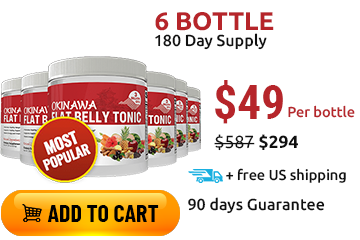
<style>
.page{position:relative;width:360px;height:240px;background:#ffffff}
.page>*{position:absolute;margin:0}
.t1{font:25.6px "Ubuntu-Bold";color:#b6252a}
.t2{font:16px "Ubuntu-Medium";color:#101010}
.t3{font:48px "RobotoCondensed-Bold";color:#b6252a}
.t4{font:14.4px "Ubuntu-Medium";color:#b6252a}
.t5{font:17.6px "Ubuntu-Regular";color:#101010}
.t6{font:17.6px "Ubuntu-Bold";color:#101010}
.t7{font:14.4px "Ubuntu-Medium";color:#101010}
.t8{font:24px "BarlowCondensed-Bold";color:#000000;text-transform:uppercase}
</style>
<div class="page">
<p class="t1" style="left:155px;top:12px;width:119px;height:19px">6 BOTTLE</p>
<p class="t2" style="left:155px;top:33px;width:112px;height:17px">180 Day Supply</p>
<p class="t3" style="left:215px;top:80px;width:68px;height:44px">$49</p>
<p class="t4" style="left:288px;top:105px;width:67px;height:13px">Per bottle</p>
<p class="t5" style="left:214px;top:134px;width:84px;height:17px">$587<span class="t6"> $294</span></p>
<p class="t7" style="left:226px;top:168px;width:120px;height:15px">+ free US shipping</p>
<p class="t2" style="left:188px;top:197px;width:137px;height:17px">90 days Guarantee</p>
<p class="t8" style="left:47px;top:205px;width:112px;height:17px">Add to cart</p>
</div>
